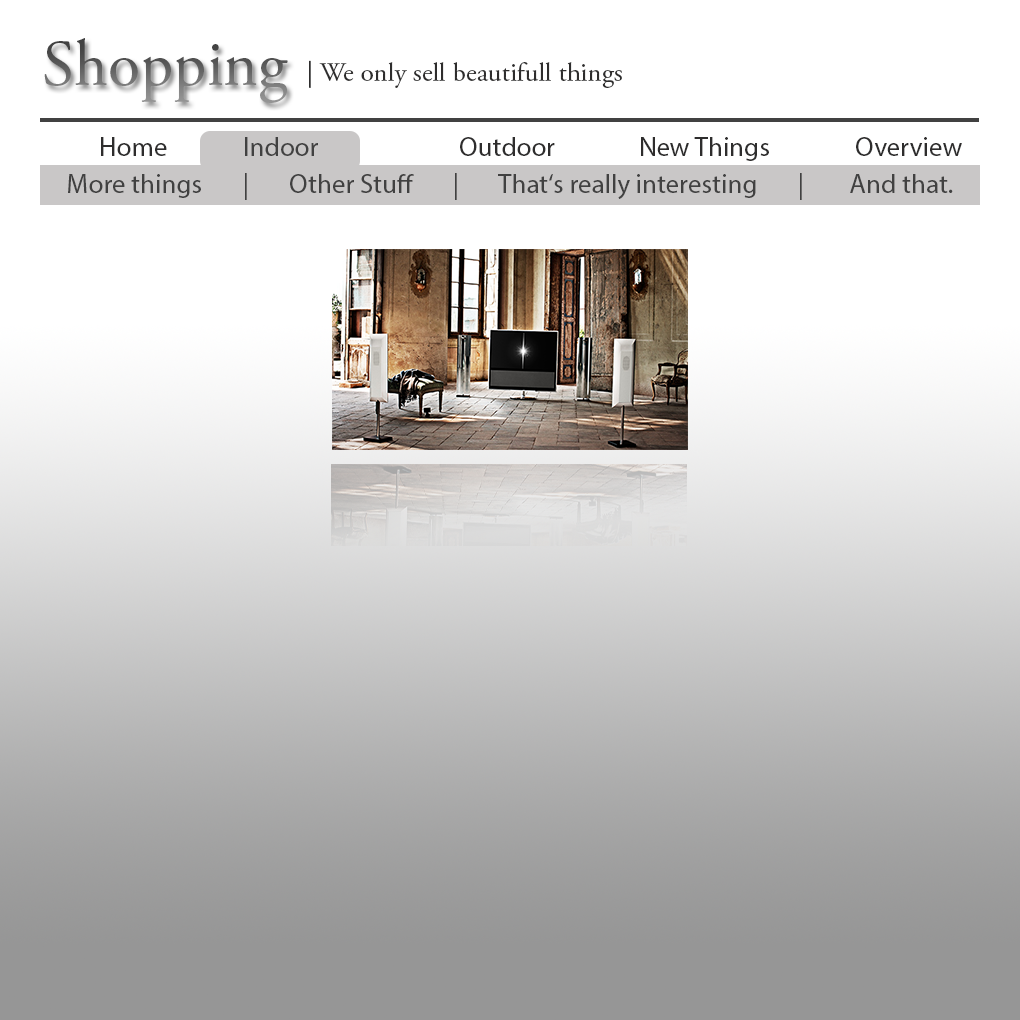
<style>
.page{position:relative;width:1020px;height:1020px;background:#ffffff}
.page>*{position:absolute;margin:0}
.t1{font:65.9px "AGaramondPro-Regular"}
.t2{font:27px "AGaramondPro-Regular";color:#2e2d2d}
.t3{font:27px "MyriadPro-Regular";color:#2e2d2d}
.t4{font:27px "MyriadPro-Regular";color:#414141}
</style>
<div class="page">
<p class="t1" style="left:44px;top:38px;width:244px;height:65px">Shopping</p>
<p class="t2" style="left:309px;top:60px;width:313px;height:28px">| We only sell beautifull things</p>
<p class="t3" style="left:101px;top:137px;width:861px;height:24px">Home   <span class="t4">Indoor </span>   Outdoor   New Things   Overview</p>
<p class="t4" style="left:68px;top:173px;width:885px;height:27px">More things       |       Other Stuff       |       That‘s really interesting       |        And that.</p>
</div>
